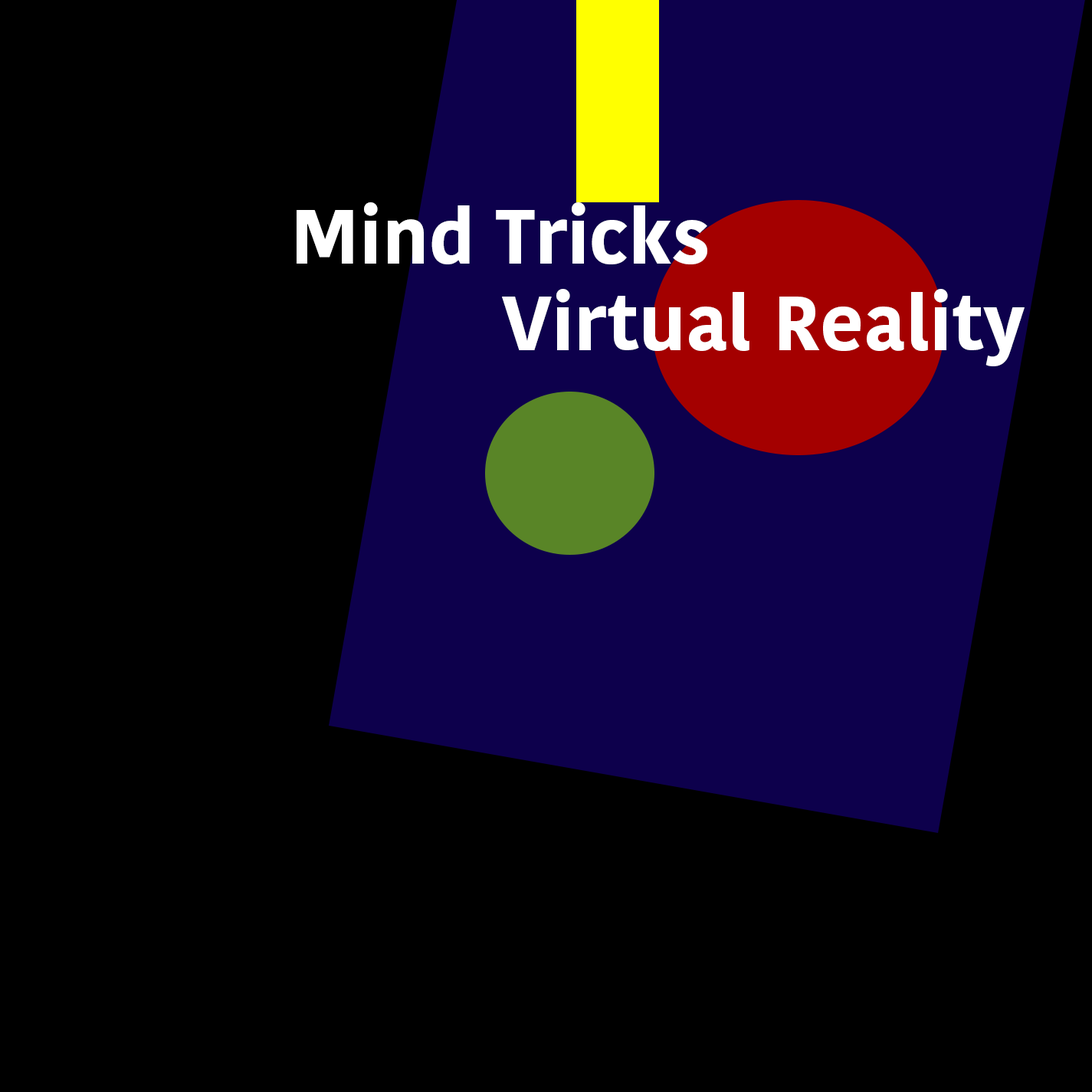
<style>
.page{position:relative;width:1092px;height:1092px;background:#000000}
.page>*{position:absolute;margin:0}
.t1{font:76.6px "KohinoorDevanagari-Bold";color:#ffffff}
</style>
<div class="page">
<p class="t1" style="left:297px;top:202px;width:410px;height:62px">Mind Tricks</p>
<p class="t1" style="left:502px;top:289px;width:523px;height:77px">Virtual Reality</p>
</div>
